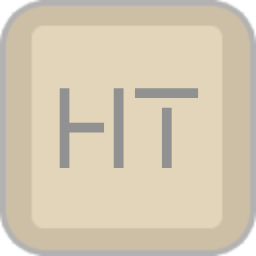
<style>
.page{position:relative;width:256px;height:256px;background:#e3d5b9}
.page>*{position:absolute;margin:0}
.t1{font:114px "VanBerger-Stencil";color:#919191}
</style>
<div class="page">
<p class="t1" style="left:59px;top:88px;width:140px;height:80px">HT</p>
</div>
